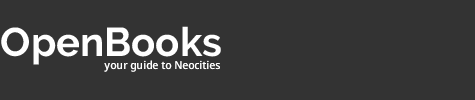
<style>
.page{position:relative;width:475px;height:100px;background:#333333}
.page>*{position:absolute;margin:0}
.t1{font:40px "Raleway-Bold";color:#ffffff}
.t2{font:11px "NotoSansDisplay-Medium";color:#ffffff}
</style>
<div class="page">
<p class="t1" style="left:1px;top:26px;width:220px;height:39px">OpenBooks</p>
<p class="t2" style="left:104px;top:60px;width:116px;height:12px">your guide to Neocities</p>
</div>
